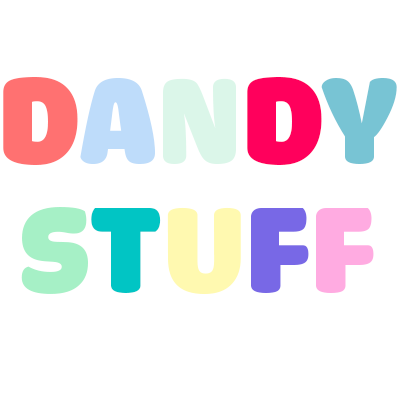
<style>
.page{position:relative;width:400px;height:400px;background:#ffffff}
.page>*{position:absolute;margin:0}
.t1{font:129.2px/129.2px "iCielCadena";letter-spacing:0.005em;color:#ff7171}
.t2{font:129.2px/129.2px "iCielCadena";letter-spacing:0.005em;color:#bedcfa}
.t3{font:129.2px/129.2px "iCielCadena";letter-spacing:0.005em;color:#dbf6e9}
.t4{font:129.2px/129.2px "iCielCadena";letter-spacing:0.005em;color:#ff005c}
.t5{font:129.2px/129.2px "iCielCadena";letter-spacing:0.005em;color:#78c4d4}
.t6{font:129.2px/129.2px "iCielCadena";letter-spacing:0.005em;color:#a6f0c6}
.t7{font:129.2px/129.2px "iCielCadena";letter-spacing:0.005em;color:#01c5c4}
.t8{font:129.2px/129.2px "iCielCadena";letter-spacing:0.005em;color:#fff9b0}
.t9{font:129.2px/129.2px "iCielCadena";letter-spacing:0.005em;color:#7868e6}
.t10{font:129.2px/129.2px "iCielCadena";letter-spacing:0.005em;color:#ffabe1}
</style>
<div class="page">
<p class="t1" style="left:3px;top:77px;width:394px;height:218px;text-align:center">D<span class="t2">A</span><span class="t3">N</span><span class="t4">D</span><span class="t5">Y<br></span><span class="t6">S</span><span class="t7">T</span><span class="t8">U</span><span class="t9">F</span><span class="t10">F</span></p>
</div>
